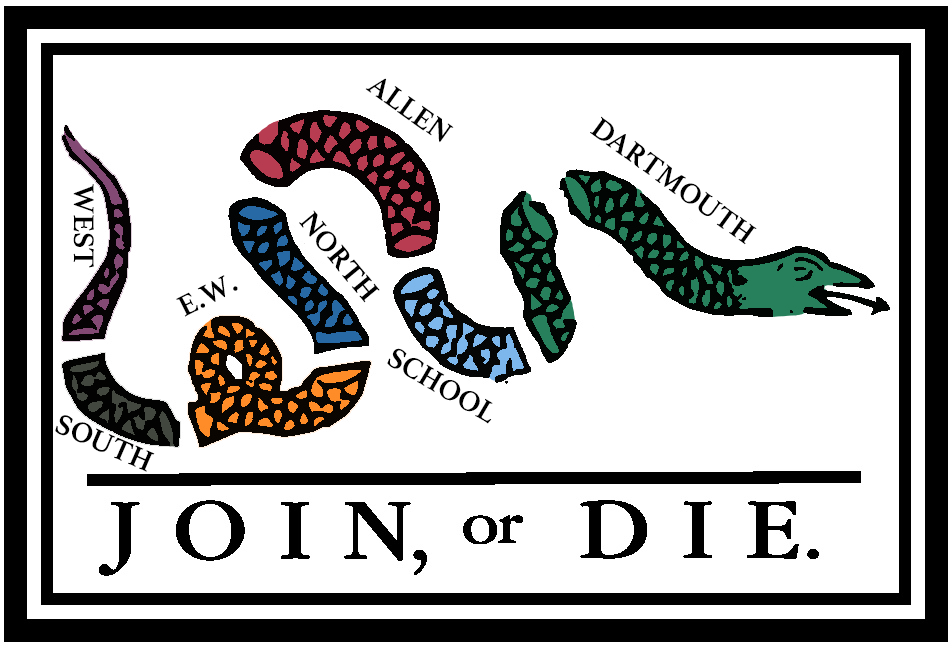
<style>
.page{position:relative;width:952px;height:648px;background:#ffffff}
.page>*{position:absolute;margin:0}
.t1{font:30px "Athelas-Bold";color:#000000}
</style>
<div class="page">
<p class="t1" style="left:365px;top:78px;width:89px;height:65px;rotate:36deg">ALLEN</p>
<p class="t1" style="left:590px;top:116px;width:167px;height:129px;rotate:36deg">DARTMOUTH</p>
<p class="t1" style="left:73px;top:184px;width:21px;height:84px;rotate:90deg">WEST</p>
<p class="t1" style="left:299px;top:210px;width:81px;height:93px;rotate:50deg">NORTH</p>
<p class="t1" style="left:176px;top:275px;width:62px;height:42px;rotate:-27deg">E.W.</p>
<p class="t1" style="left:387px;top:348px;width:106px;height:76px;rotate:30deg">SCHOOL</p>
<p class="t1" style="left:55px;top:415px;width:100px;height:57px;rotate:24deg">SOUTH</p>
</div>
